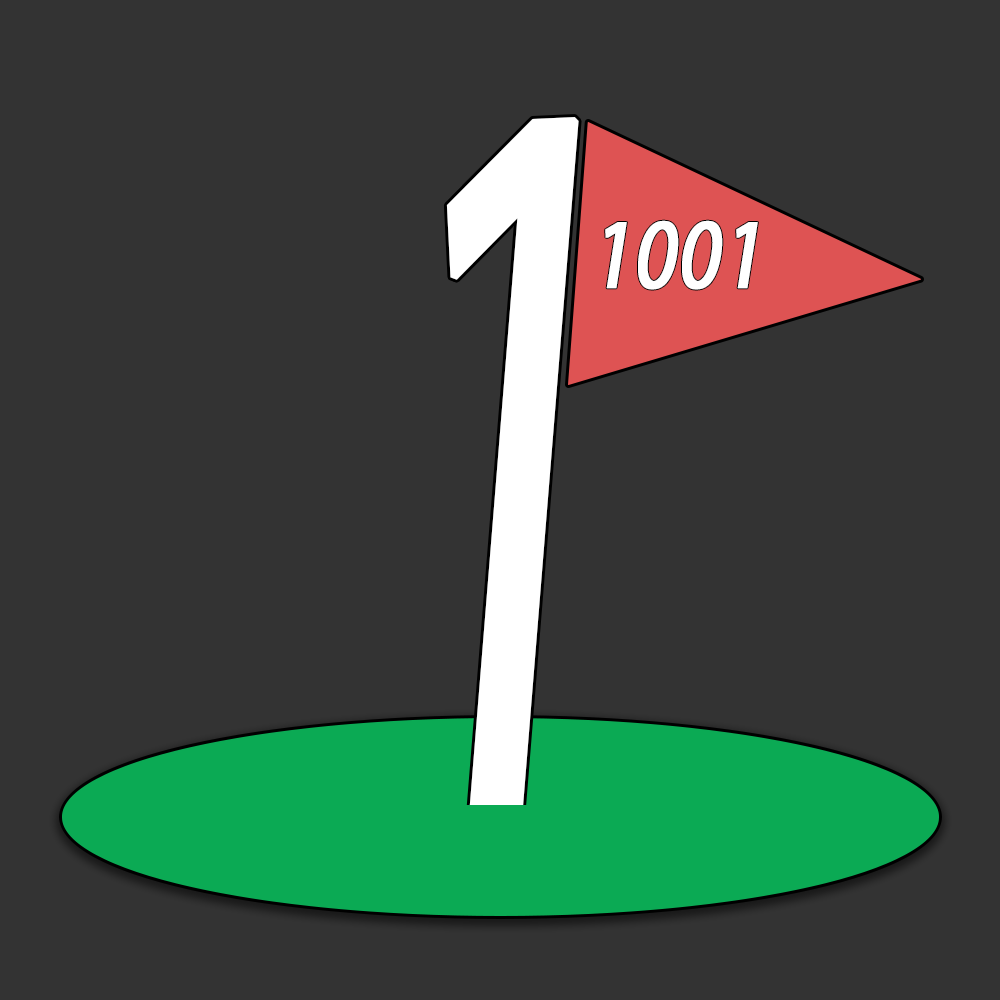
<style>
.page{position:relative;width:1000px;height:1000px;background:#333333}
.page>*{position:absolute;margin:0}
.t1{font:1054.3px "MyriadPro-Regular";color:#ffffff;font-weight:bold;font-style:italic;scale:0.52 1}
.t2{font:99.2px "MyriadPro-Regular";color:#ffffff;font-weight:bold;font-style:italic;scale:0.81 1}
</style>
<div class="page">
<p class="t1" style="left:446px;top:117px;width:133px;height:698px;rotate:-3deg">1</p>
<p class="t2" style="left:605px;top:220px;width:153px;height:70px">1001</p>
</div>
